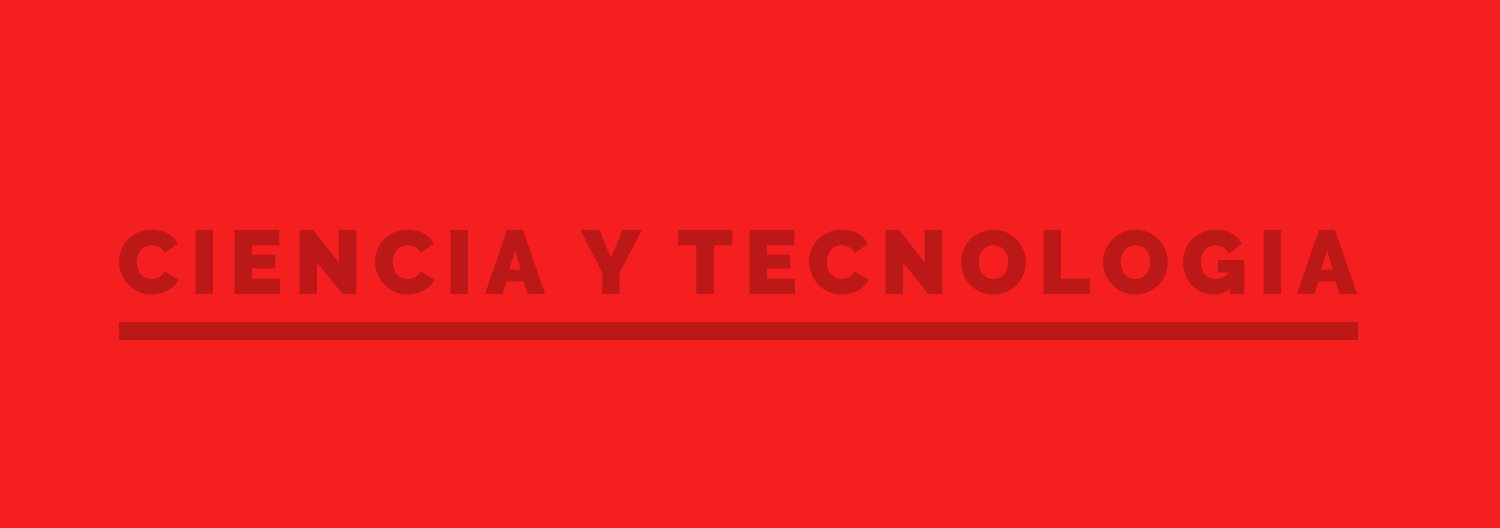
<style>
.page{position:relative;width:1500px;height:528px;background:#f61f1f}
.page>*{position:absolute;margin:0}
.t1{font:90px "Raleway-Black";letter-spacing:0.12em;color:#bc1818}
</style>
<div class="page">
<p class="t1" style="left:119px;top:229px;width:1239px;height:66px">CIENCIA Y TECNOLOGIA</p>
</div>
